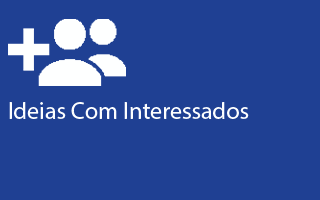
<style>
.page{position:relative;width:320px;height:200px;background:#1f4093}
.page>*{position:absolute;margin:0}
.t1{font:24px "MyriadPro-Regular";color:#feffff}
</style>
<div class="page">
<p class="t1" style="left:9px;top:102px;width:240px;height:17px">Ideias Com Interessados</p>
</div>
